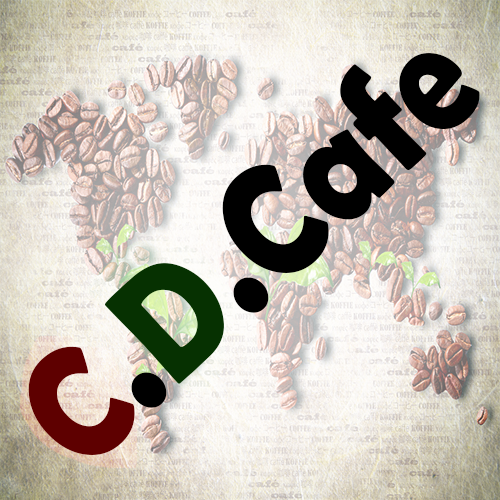
<style>
.page{position:relative;width:500px;height:500px}
.page>*{position:absolute;margin:0}
.t1{font:160.4px "BerlinSansFBDemi-Bold";color:#000000;scale:0.88 1}
</style>
<div class="page">
<p class="t1" style="left:28px;top:53px;width:452px;height:402px;rotate:-43deg">C.D.Cafe</p>
</div>
